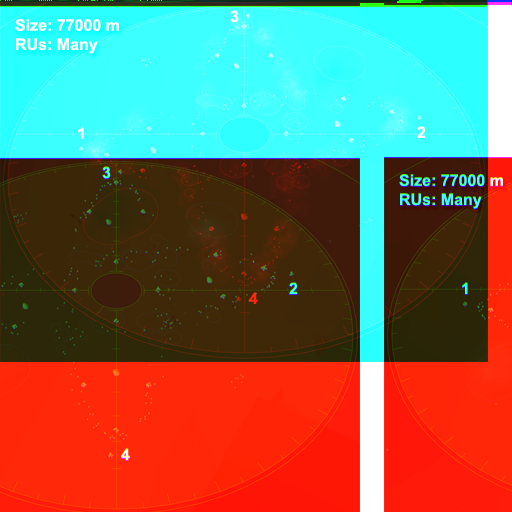
<style>
.page{position:relative;width:512px;height:512px}
.page>*{position:absolute;margin:0}
.t1{font:16px "Arial-BoldMT"}
.t2{font:16px "Arial-BoldMT";color:#ffffff}
</style>
<div class="page">
<p class="t1" style="left:15px;top:17px;width:104px;height:35px">Size: 77000 m<br>RUs: Many</p>
<p class="t2" style="left:78px;top:125px;width:6px;height:12px">1</p>
<p class="t1" style="left:249px;top:290px;width:9px;height:12px">4</p>
</div>
